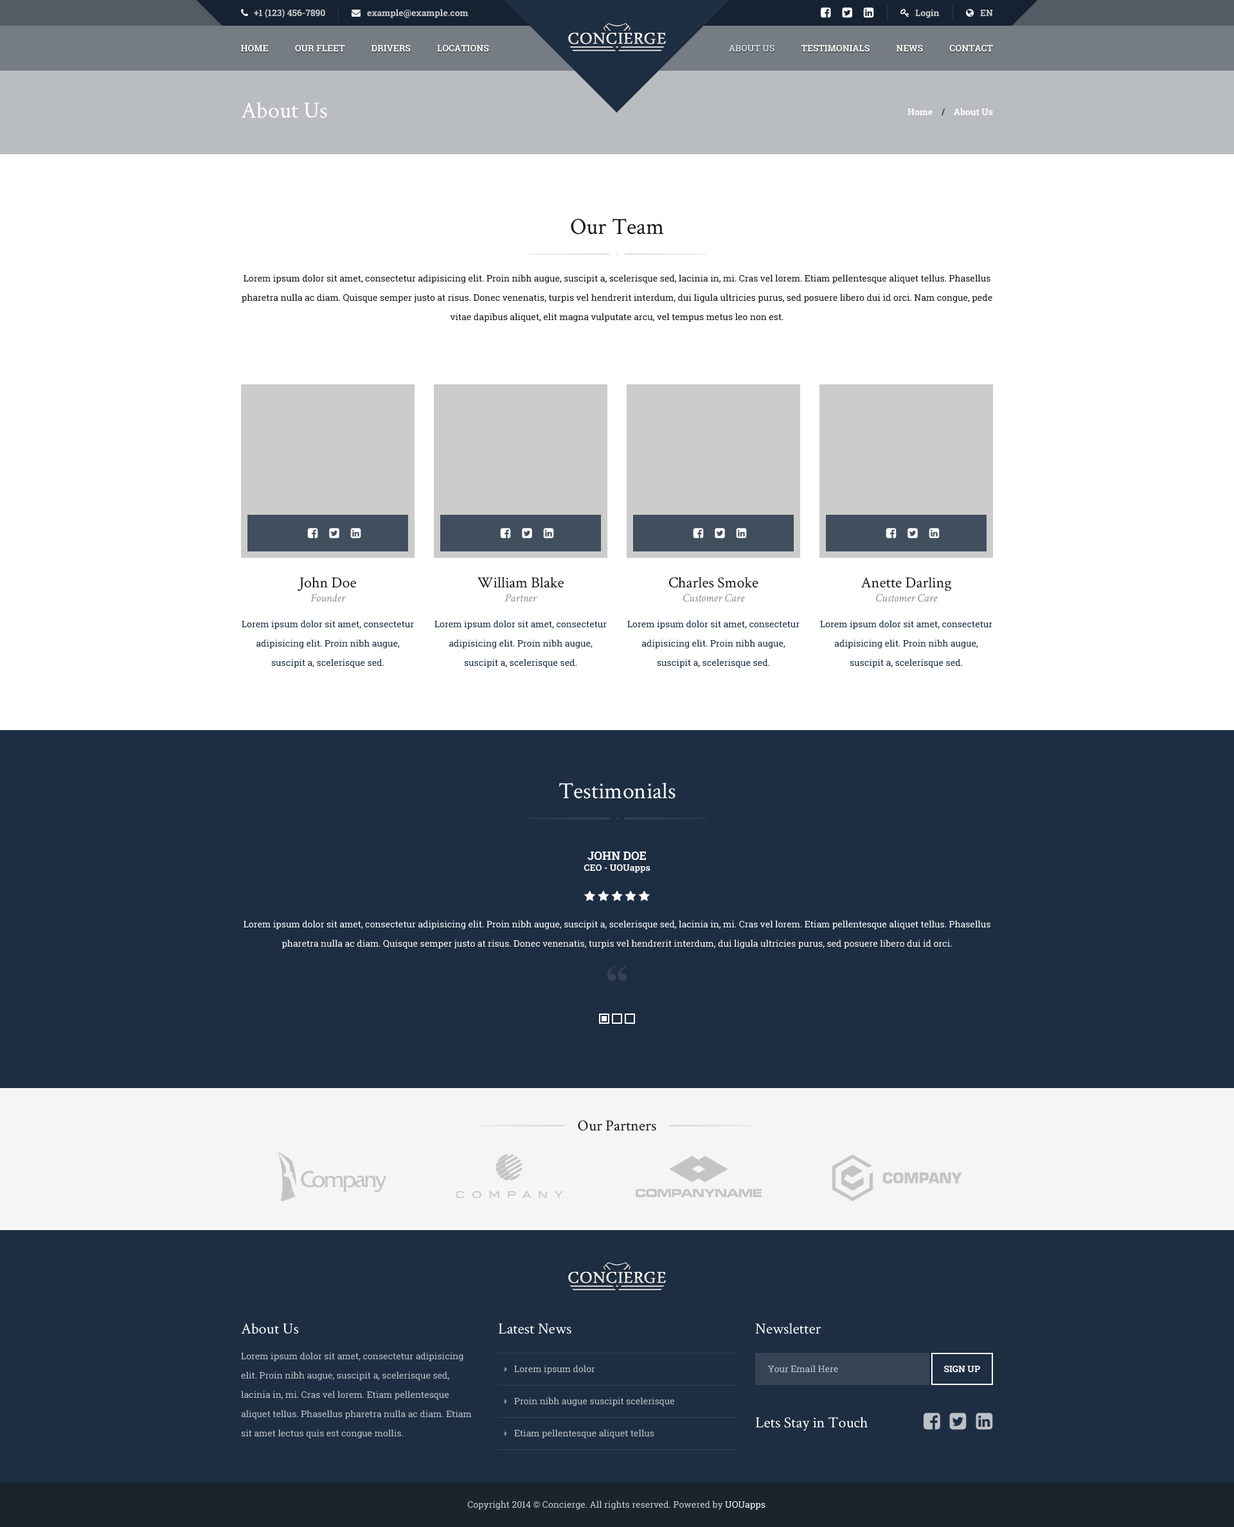
<style>
.page{position:relative;width:1234px;height:1527px;background:#1e2e42}
.page>*{position:absolute;margin:0}
.t1{font:9px "RobotoSlab-Bold";color:#cccccc}
.t2{font:9px "RobotoSlab-Bold";color:#ffffff;text-transform:uppercase}
.t3{font:9px "RobotoSlab-Bold";color:#d0dae6;text-transform:uppercase}
.t4{font:23.1px "CrimsonText-Roman";color:#ffffff}
.t5{font:9px "RobotoSlab-Bold";color:#ffffff}
.t6{font:9px "RobotoSlab-Bold";color:#1e2e42}
.t7{font:23.1px "CrimsonText-Roman";color:#1a1a1a}
.t8{font:9px/19.3px "RobotoSlab-Regular";color:#1a1a1a}
.t9{font:15.4px "CrimsonText-Roman";color:#1a1a1a}
.t10{font:11.6px "CrimsonText-Italic";color:#8c8c8c}
.t11{font:9px/19.3px "RobotoSlab-Regular";color:#1e2e42}
.t12{font:11.6px "RobotoSlab-Bold";color:#ffffff;text-transform:uppercase}
.t13{font:9px/19.3px "RobotoSlab-Regular";color:#ffffff}
.t14{font:15.4px "CrimsonText-Roman";color:#ffffff}
.t15{font:9px/19.3px "RobotoSlab-Regular";color:#bcc1c7}
.t16{font:9px/32.1px "RobotoSlab-Regular";color:#bcc1c7}
.t17{font:9px "RobotoSlab-Regular";color:#c3c7cd}
.t18{font:9px "RobotoSlab-Regular";color:#c8cbd0}
.t19{font:9px "RobotoSlab-Regular";color:#ffffff}
</style>
<div class="page">
<p class="t1" style="left:254px;top:8px;width:71px;height:10px">+1 (123) 456-7890</p>
<p class="t1" style="left:367px;top:9px;width:102px;height:9px">example@example.com</p>
<p class="t1" style="left:915px;top:9px;width:25px;height:9px">Login</p>
<p class="t1" style="left:980px;top:10px;width:13px;height:6px">EN</p>
<p class="t2" style="left:241px;top:44px;width:248px;height:8px">Home            Our Fleet            Drivers            Locations</p>
<p class="t2" style="left:729px;top:44px;width:264px;height:8px"><span class="t3">About Us</span>            Testimonials            News            Contact</p>
<p class="t4" style="left:241px;top:102px;width:86px;height:16px">About Us</p>
<p class="t5" style="left:908px;top:108px;width:85px;height:8px">Home    <span class="t6">/</span>    About Us</p>
<p class="t7" style="left:571px;top:219px;width:93px;height:16px">Our Team</p>
<p class="t8" style="left:242px;top:274px;width:751px;height:48px;text-align:center">Lorem ipsum dolor sit amet, consectetur adipisicing elit. Proin nibh augue, suscipit a, scelerisque sed, lacinia in, mi. Cras vel lorem. Etiam pellentesque aliquet tellus. Phasellus pharetra nulla ac diam. Quisque semper justo at risus. Donec venenatis, turpis vel hendrerit interdum, dui ligula ultricies purus, sed posuere libero dui id orci. Nam congue, pede vitae dapibus aliquet, elit magna vulputate arcu, vel tempus metus leo non est.</p>
<p class="t9" style="left:298px;top:577px;width:58px;height:14px">John Doe</p>
<p class="t9" style="left:478px;top:577px;width:86px;height:11px">William Blake</p>
<p class="t9" style="left:669px;top:577px;width:90px;height:11px">Charles Smoke</p>
<p class="t9" style="left:861px;top:577px;width:90px;height:14px">Anette Darling</p>
<p class="t10" style="left:310px;top:594px;width:36px;height:8px">Founder</p>
<p class="t10" style="left:505px;top:594px;width:32px;height:8px">Partner</p>
<p class="t10" style="left:683px;top:594px;width:62px;height:8px">Customer Care</p>
<p class="t10" style="left:876px;top:594px;width:62px;height:8px">Customer Care</p>
<p class="t11" style="left:242px;top:620px;width:172px;height:48px;text-align:center">Lorem ipsum dolor sit amet, consectetur adipisicing elit. Proin nibh augue, suscipit a, scelerisque sed.</p>
<p class="t11" style="left:435px;top:620px;width:172px;height:48px;text-align:center">Lorem ipsum dolor sit amet, consectetur adipisicing elit. Proin nibh augue, suscipit a, scelerisque sed.</p>
<p class="t11" style="left:627px;top:620px;width:173px;height:48px;text-align:center">Lorem ipsum dolor sit amet, consectetur adipisicing elit. Proin nibh augue, suscipit a, scelerisque sed.</p>
<p class="t11" style="left:820px;top:620px;width:173px;height:48px;text-align:center">Lorem ipsum dolor sit amet, consectetur adipisicing elit. Proin nibh augue, suscipit a, scelerisque sed.</p>
<p class="t4" style="left:559px;top:782px;width:117px;height:17px">Testimonials</p>
<p class="t5" style="left:584px;top:851px;width:67px;height:22px;text-align:center"><span class="t12">John Doe<br></span>CEO - UOUapps</p>
<p class="t13" style="left:244px;top:921px;width:747px;height:28px;text-align:center">Lorem ipsum dolor sit amet, consectetur adipisicing elit. Proin nibh augue, suscipit a, scelerisque sed, lacinia in, mi. Cras vel lorem. Etiam pellentesque aliquet tellus. Phasellus pharetra nulla ac diam. Quisque semper justo at risus. Donec venenatis, turpis vel hendrerit interdum, dui ligula ultricies purus, sed posuere libero dui id orci.</p>
<p class="t9" style="left:578px;top:1120px;width:78px;height:11px">Our Partners</p>
<p class="t14" style="left:241px;top:1323px;width:58px;height:12px">About Us</p>
<p class="t14" style="left:498px;top:1324px;width:73px;height:11px">Latest News</p>
<p class="t14" style="left:755px;top:1323px;width:67px;height:12px">Newsletter</p>
<p class="t15" style="left:241px;top:1353px;width:231px;height:86px">Lorem ipsum dolor sit amet, consectetur adipisicing elit. Proin nibh augue, suscipit a, scelerisque sed, lacinia in, mi. Cras vel lorem. Etiam pellentesque aliquet tellus. Phasellus pharetra nulla ac diam. Etiam sit amet lectus quis est congue mollis.</p>
<p class="t16" style="left:514px;top:1365px;width:160px;height:74px">Lorem ipsum dolor<br>Proin nibh augue suscipit scelerisque<br>Etiam pellentesque aliquet tellus</p>
<p class="t17" style="left:768px;top:1365px;width:70px;height:8px">Your Email Here</p>
<p class="t2" style="left:944px;top:1365px;width:36px;height:8px">Sign Up</p>
<p class="t14" style="left:755px;top:1417px;width:113px;height:15px">Lets Stay in Touch</p>
<p class="t18" style="left:467px;top:1501px;width:299px;height:9px">Copyright 2014 © Concierge. All rights reserved. Powered by <span class="t19">UOUapps</span></p>
</div>
